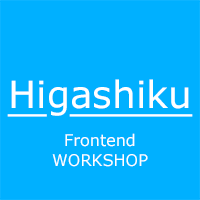
<style>
.page{position:relative;width:200px;height:200px;background:#00b0ff}
.page>*{position:absolute;margin:0}
.t1{font:37.6px "Verdana";color:#ffffff;text-decoration:underline}
.t2{font:37.6px "Verdana";color:#ffffff}
.t3{font:16px "Verdana";color:#ffffff}
</style>
<div class="page">
<p class="t1" style="left:7px;top:79px;width:186px;height:38px">Hi<span class="t2">g</span>ashiku</p>
<p class="t3" style="left:65px;top:133px;width:70px;height:14px">Frontend</p>
<p class="t3" style="left:52px;top:154px;width:96px;height:13px">WORKSHOP</p>
</div>
